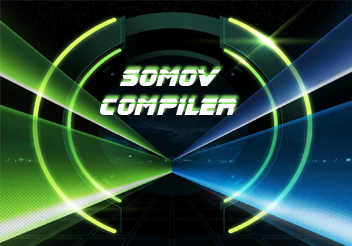
<style>
.page{position:relative;width:352px;height:246px}
.page>*{position:absolute;margin:0}
.t1{font:24px "BladeRunnerMovieFont";color:#ffffff}
.t2{font:24px "BladeRunnerMovieFont";color:#49699a}
</style>
<div class="page">
<p class="t1" style="left:100px;top:69px;width:137px;height:46px"><span class="t2">   </span>somov<br>compiler</p>
</div>
